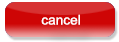
<style>
.page{position:relative;width:119px;height:42px;background:#ce0505}
.page>*{position:absolute;margin:0}
.t1{font:13.6px "ArialMT";color:#ffffff}
</style>
<div class="page">
<p class="t1" style="left:41px;top:14px;width:39px;height:11px">cancel</p>
</div>
